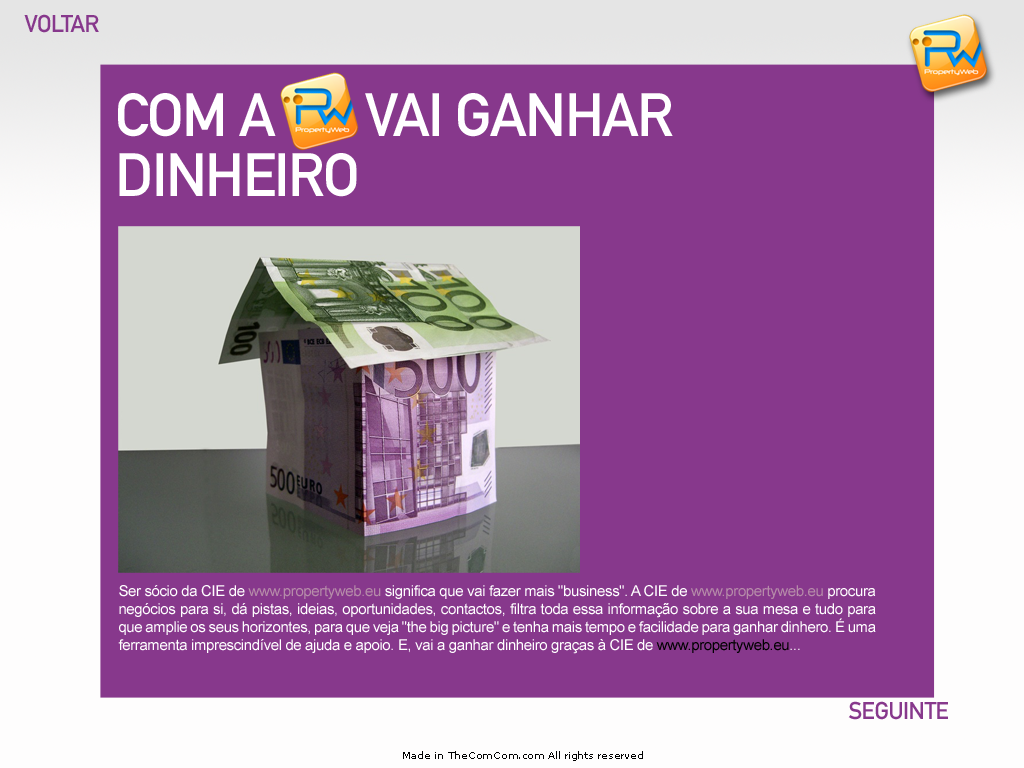
<style>
.page{position:relative;width:1024px;height:768px;background:#87388c}
.page>*{position:absolute;margin:0}
.t1{font:24px "DINMittelschriftStd";letter-spacing:-0.025em;color:#87388c}
.t2{font:60px/60px "DINMittelschriftStd";letter-spacing:-0.025em;color:#ffffff;text-transform:uppercase}
.t3{font:15px "ArialMT";letter-spacing:-0.025em;color:#ffffff}
.t4{font:15px "ArialMT";letter-spacing:-0.025em;color:#b68ca9}
.t5{font:15px "ArialMT";letter-spacing:-0.025em;color:#010101}
.t6{font:10px "MSReferenceSansSerif";letter-spacing:-0.025em;color:#010101}
</style>
<div class="page">
<p class="t1" style="left:24px;top:14px;width:75px;height:19px">VOLTAR</p>
<p class="t2" style="left:118px;top:93px;width:555px;height:104px">COM A       VAI GANHAR DINHEIRO</p>
<p class="t3" style="left:118px;top:585px;width:758px;height:69px;text-align:justify">Ser sócio da CIE de <span class="t4">www.propertyweb.eu</span> significa que vai fazer mais "business". A CIE de <span class="t4">www.propertyweb.eu</span> procura negócios para si, dá pistas, ideias, oportunidades, contactos, filtra toda essa informação sobre a sua mesa e tudo para que amplie os seus horizontes, para que veja "the big picture" e tenha mais tempo e facilidade para ganhar dinhero. É uma ferramenta imprescindível de ajuda e apoio. E, vai a ganhar dinheiro graças à CIE de<span class="t5"> www.propertyweb.eu</span>...</p>
<p class="t1" style="left:848px;top:701px;width:100px;height:19px">SEGUINTE</p>
<p class="t6" style="left:403px;top:751px;width:240px;height:10px">Made in TheComCom.com All rights reserved</p>
</div>
